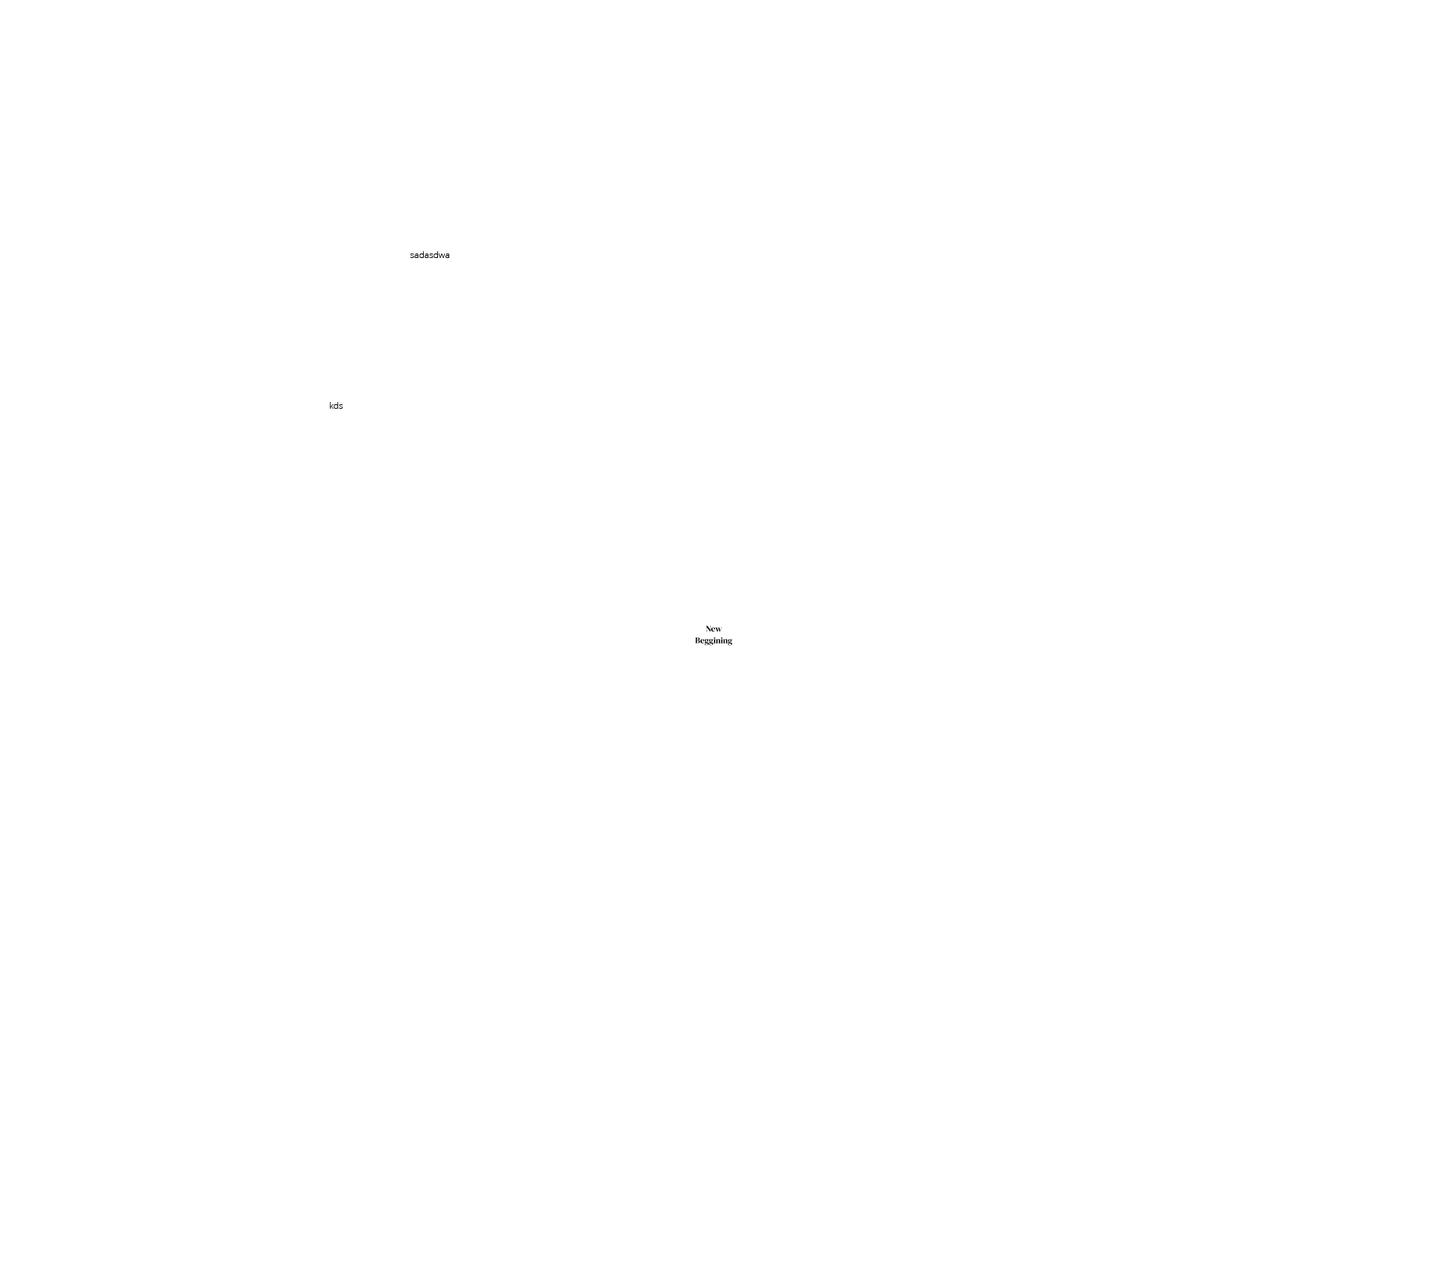
<style>
.page{position:relative;width:1431px;height:1275px;background:#ffffff}
.page>*{position:absolute;margin:0}
.t1{font:9px "OpenSans-Light";color:#000000}
</style>
<div class="page">
<p class="t1" style="left:410px;top:251px;width:39px;height:7px">sadasdwa</p>
<p class="t1" style="left:329px;top:402px;width:14px;height:7px">kds</p>
</div>
